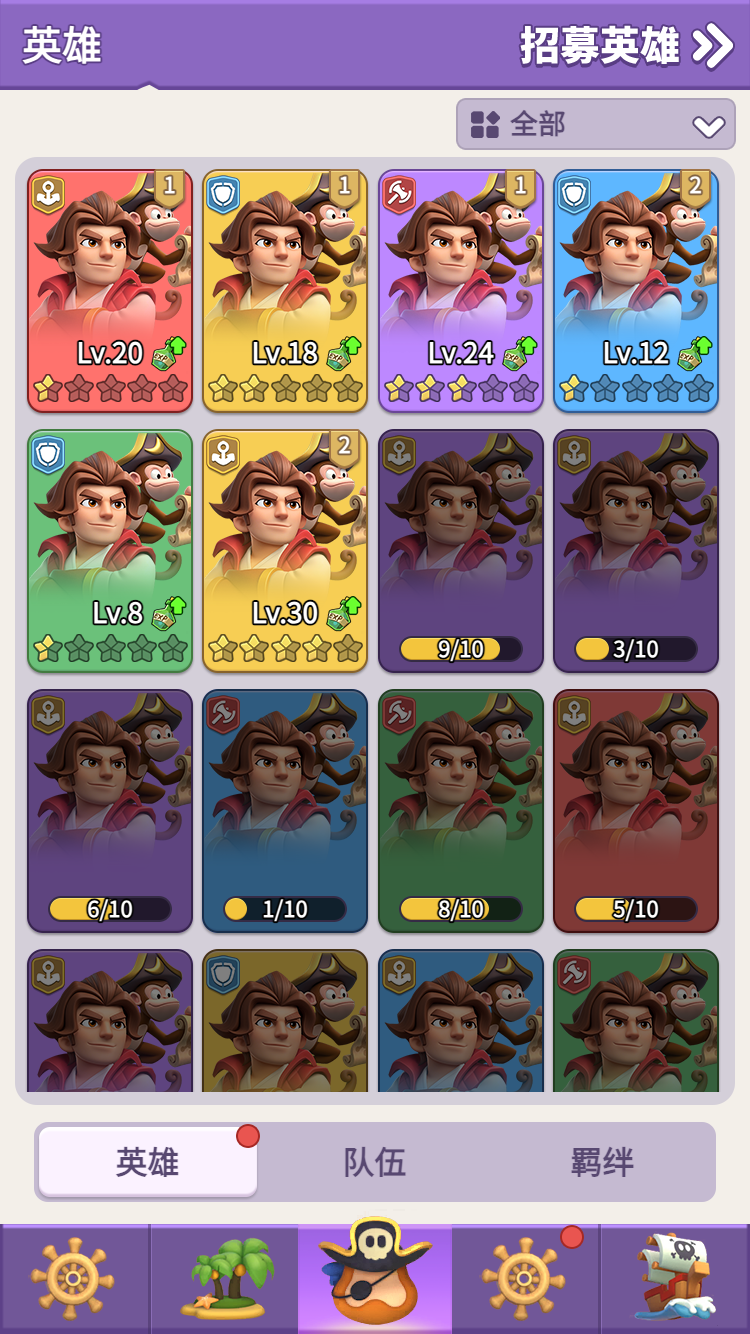
<style>
.page{position:relative;width:750px;height:1334px}
.page>*{position:absolute;margin:0}
.t1{font:40px "WebPSD-18463539-0-Regular";color:#ffffff;font-weight:bold}
.t2{font:28px "WebPSD-18463539-0-Regular";color:#584871;font-weight:bold}
.t3{font:22px "WebPSD-18463539-0-Regular";color:#ffffff;font-weight:bold}
.t4{font:28px "WebPSD-18463539-0-Regular";color:#ffffff;font-weight:bold}
.t5{font:32px/32px "WebPSD-18463539-0-Regular";color:#584871;font-weight:bold}
</style>
<div class="page">
<p class="t1" style="left:20px;top:16px;width:200px;height:58px">英雄</p>
<p class="t2" style="left:510px;top:106px;width:170px;height:36px">全部</p>
<p class="t3" style="left:152px;top:169px;width:35px;height:32px">1</p>
<p class="t3" style="left:327px;top:169px;width:35px;height:32px">1</p>
<p class="t3" style="left:503px;top:169px;width:35px;height:32px">1</p>
<p class="t3" style="left:678px;top:169px;width:35px;height:32px">2</p>
<p class="t4" style="left:35px;top:337px;width:110px;height:32px">Lv.20</p>
<p class="t4" style="left:210px;top:337px;width:110px;height:32px">Lv.18</p>
<p class="t4" style="left:386px;top:337px;width:110px;height:32px">Lv.24</p>
<p class="t4" style="left:561px;top:337px;width:110px;height:32px">Lv.12</p>
<p class="t3" style="left:327px;top:429px;width:35px;height:32px">2</p>
<p class="t4" style="left:35px;top:597px;width:110px;height:32px">Lv.8</p>
<p class="t4" style="left:210px;top:597px;width:110px;height:32px">Lv.30</p>
<p class="t3" style="left:399px;top:634px;width:124px;height:30px">9/10</p>
<p class="t3" style="left:574px;top:634px;width:124px;height:30px">3/10</p>
<p class="t3" style="left:48px;top:894px;width:124px;height:30px">6/10</p>
<p class="t3" style="left:223px;top:894px;width:124px;height:30px">1/10</p>
<p class="t3" style="left:399px;top:894px;width:124px;height:30px">8/10</p>
<p class="t3" style="left:574px;top:894px;width:124px;height:30px">5/10</p>
<p class="t5" style="left:34px;top:1122px;width:227px;height:80px;text-align:center">英雄</p>
<p class="t5" style="left:261px;top:1122px;width:227px;height:80px;text-align:center">队伍</p>
<p class="t5" style="left:489px;top:1122px;width:227px;height:80px;text-align:center">羁绊</p>
</div>
